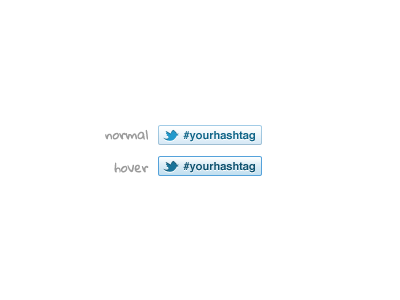
<style>
.page{position:relative;width:400px;height:300px;background:#ffffff}
.page>*{position:absolute;margin:0}
.t1{font:12px "GloriaHallelujah";color:#9c9c9c}
.t2{font:11px "Helvetica-Bold";color:#0e6488}
.t3{font:11px "Helvetica-Bold";color:#0b506e}
</style>
<div class="page">
<p class="t1" style="left:105px;top:129px;width:43px;height:11px">normal</p>
<p class="t2" style="left:183px;top:131px;width:72px;height:11px">#yourhashtag</p>
<p class="t1" style="left:114px;top:162px;width:35px;height:11px">hover</p>
<p class="t3" style="left:183px;top:162px;width:72px;height:11px">#yourhashtag</p>
</div>
